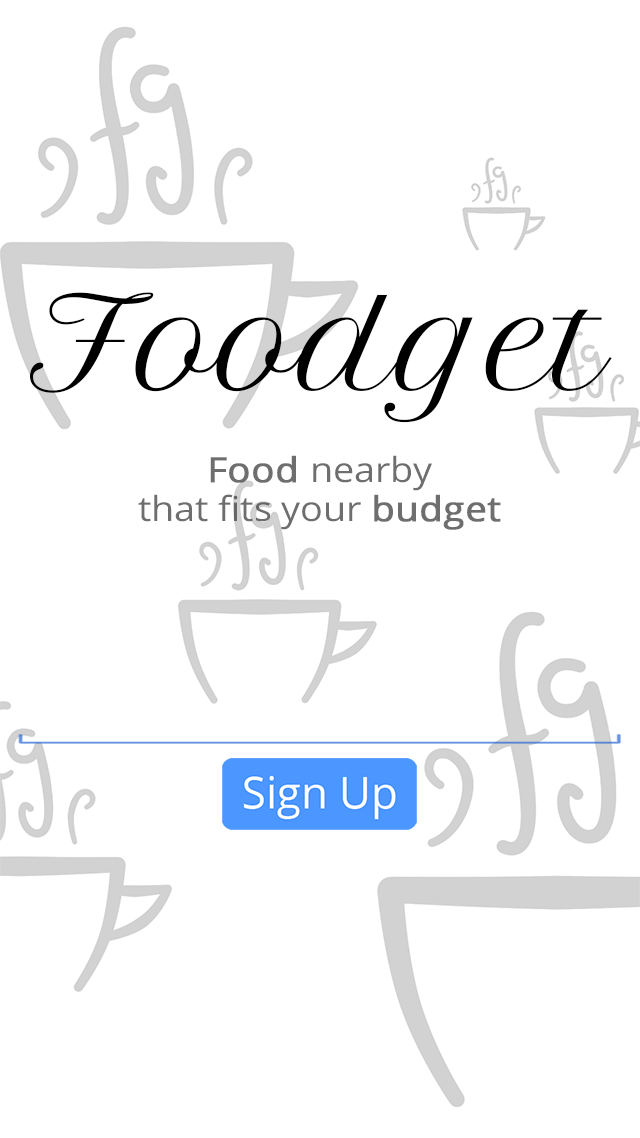
<style>
.page{position:relative;width:640px;height:1138px;background:#ffffff}
.page>*{position:absolute;margin:0}
.t1{font:123.6px "PetitFormalScript-Regular";color:#000000;scale:1.09 1}
.t2{font:34.5px/38.3px "OpenSans";color:#585858;scale:1.09 1}
.t3{font:34.5px/38.3px "OpenSans";color:#585858;font-weight:bold;scale:1.09 1}
</style>
<div class="page">
<p class="t1" style="left:30px;top:292px;width:582px;height:131px">Foodget</p>
<p class="t2" style="left:138px;top:455px;width:363px;height:75px;text-align:center;opacity:0.9"><span class="t3">Food </span>nearby<br>that fits your <span class="t3">budget</span></p>
</div>
